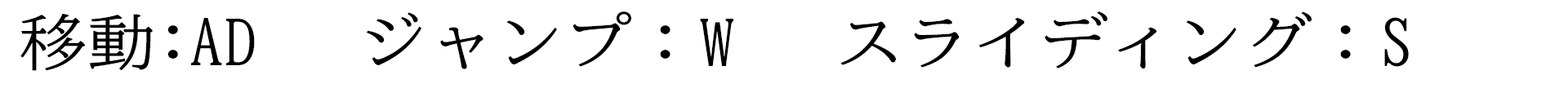
<style>
.page{position:relative;width:1568px;height:88px;background:#ffffff}
.page>*{position:absolute;margin:0}
.t1{font:61.2px "BIZ-UDMincho-Medium";color:#000000;scale:1.11 1}
</style>
<div class="page">
<p class="t1" style="left:20px;top:11px;width:1389px;height:60px">移動:AD   ジャンプ：W   スライディング：S</p>
</div>
